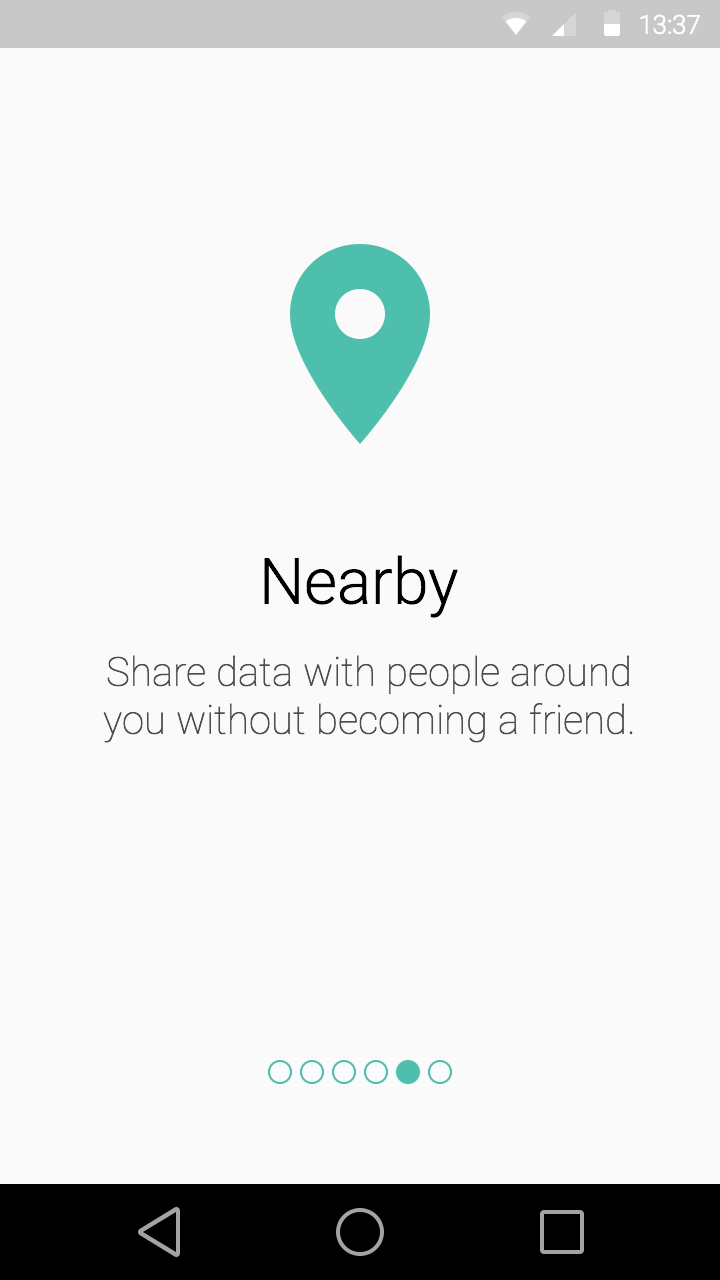
<style>
.page{position:relative;width:720px;height:1280px;background:#fafafa}
.page>*{position:absolute;margin:0}
.t1{font:26.1px "Roboto-Light";color:#ffffff}
.t2{font:64px "Roboto-Light";color:#000000}
.t3{font:40px/48px "Roboto-Thin";color:#4d4d4d}
</style>
<div class="page">
<p class="t1" style="left:640px;top:14px;width:60px;height:21px">13:37</p>
<p class="t2" style="left:264px;top:555px;width:194px;height:63px">Nearby</p>
<p class="t3" style="left:103px;top:655px;width:530px;height:88px;text-align:center">Share data with people around<br>you without becoming a friend.</p>
</div>
